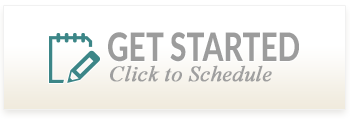
<style>
.page{position:relative;width:350px;height:122px;background:#ffffff}
.page>*{position:absolute;margin:0}
.t1{font:39px "Lato-Heavy";color:#9c9c9c;scale:0.77 1}
.t2{font:22px "TimesNewRomanPS-ItalicMT";color:#9f9f9f;font-weight:bold}
</style>
<div class="page">
<p class="t1" style="left:108px;top:32px;width:191px;height:30px">GET STARTED</p>
<p class="t2" style="left:110px;top:65px;width:162px;height:17px">Click to Schedule</p>
</div>
